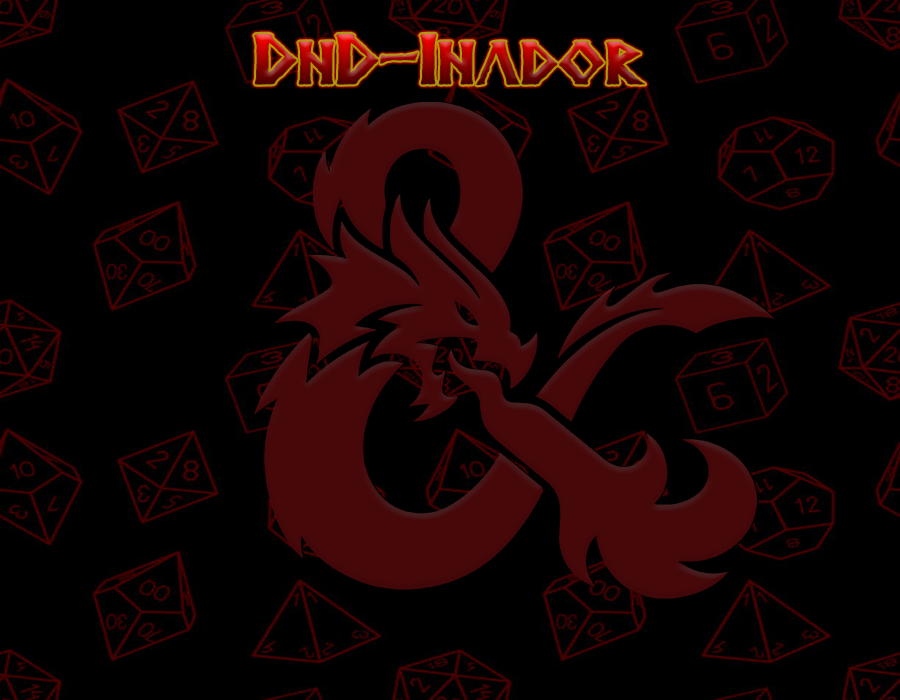
<style>
.page{position:relative;width:900px;height:700px;background:#000000}
.page>*{position:absolute;margin:0}
.t1{font:72px "Anglodavek-Bold"}
</style>
<div class="page">
<p class="t1" style="left:254px;top:33px;width:392px;height:53px">DnD-Inador</p>
</div>
